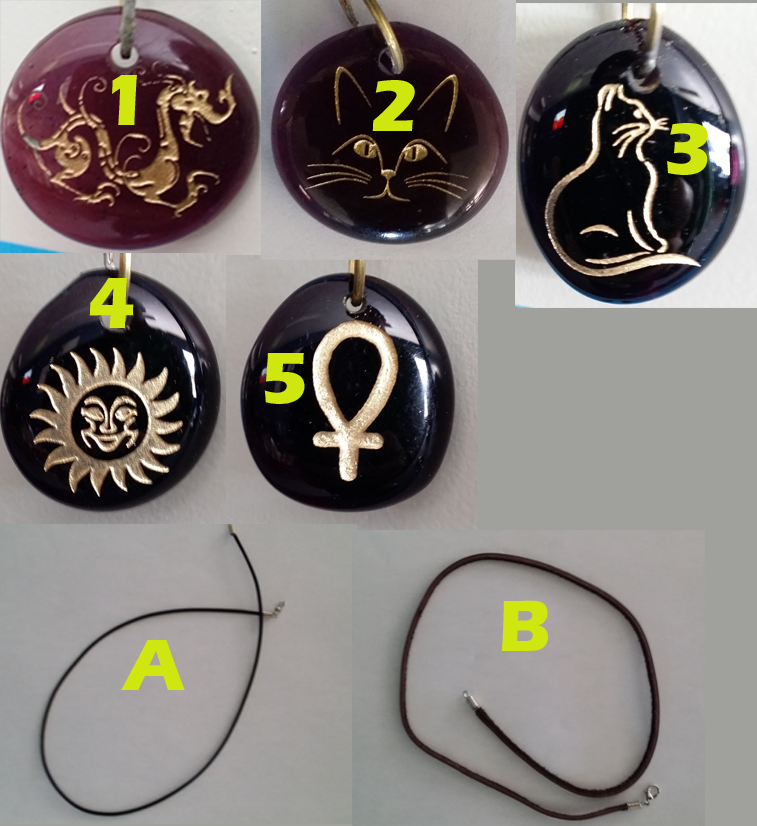
<style>
.page{position:relative;width:757px;height:826px}
.page>*{position:absolute;margin:0}
.t1{font:75px "ErasITC-Bold";color:#d0e70f}
</style>
<div class="page">
<p class="t1" style="left:112px;top:75px;width:25px;height:50px">1</p>
<p class="t1" style="left:372px;top:80px;width:43px;height:51px">2</p>
<p class="t1" style="left:667px;top:123px;width:41px;height:52px">3</p>
<p class="t1" style="left:89px;top:278px;width:45px;height:50px">4</p>
<p class="t1" style="left:264px;top:353px;width:41px;height:51px">5</p>
<p class="t1" style="left:501px;top:600px;width:47px;height:51px">B</p>
<p class="t1" style="left:121px;top:640px;width:64px;height:50px">A</p>
</div>
